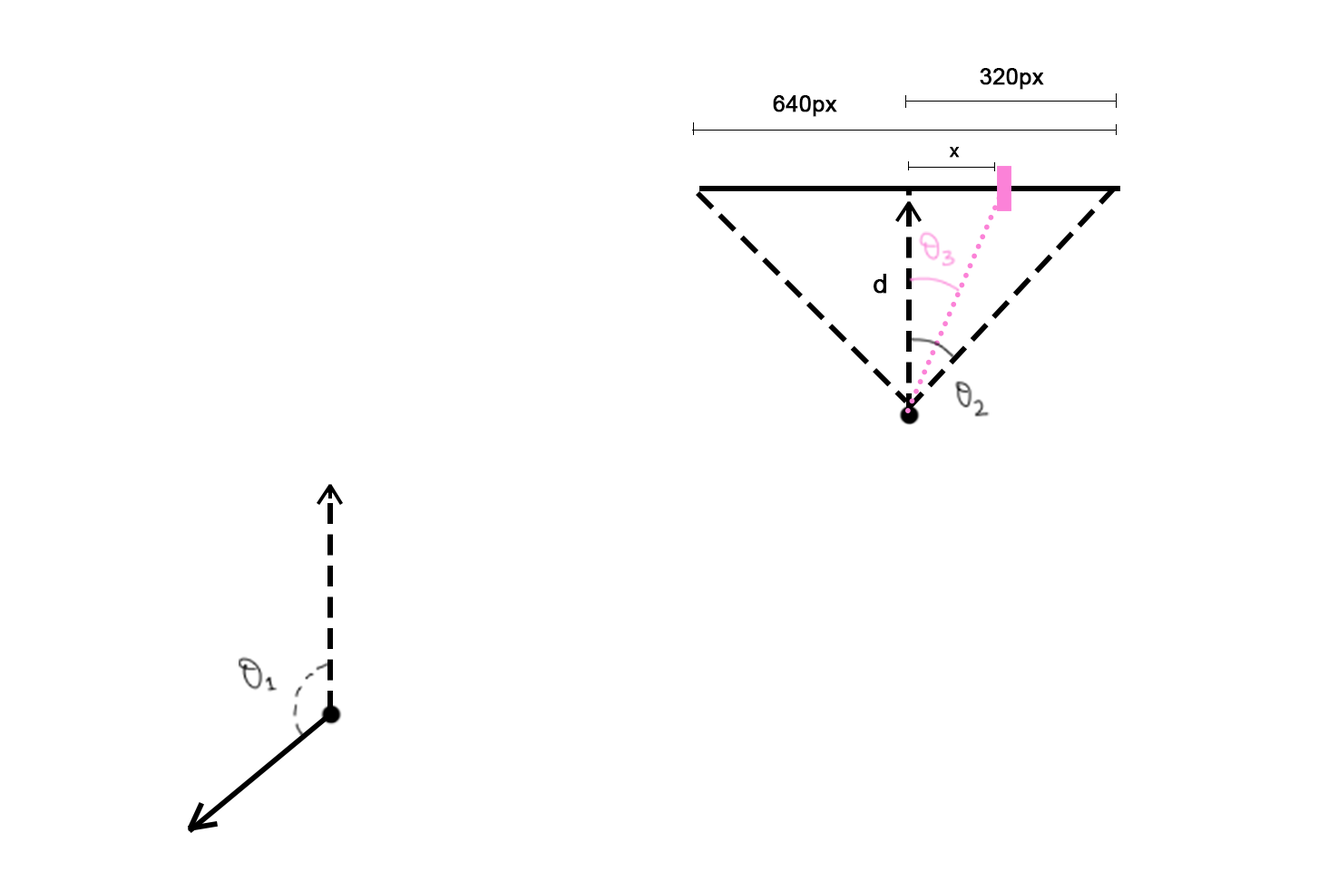
<style>
.page{position:relative;width:1338px;height:891px;background:#ffffff}
.page>*{position:absolute;margin:0}
.t1{font:22.7px "ArialMT";color:#000000;font-weight:bold}
.t2{font:18.9px "ArialMT";color:#000000;font-weight:bold}
.t3{font:26.5px "ArialMT";color:#000000;font-weight:bold}
</style>
<div class="page">
<p class="t1" style="left:979px;top:68px;width:65px;height:22px">320px</p>
<p class="t1" style="left:773px;top:95px;width:64px;height:22px">640px</p>
<p class="t2" style="left:949px;top:147px;width:10px;height:11px">x</p>
<p class="t3" style="left:873px;top:274px;width:13px;height:20px">d</p>
</div>
